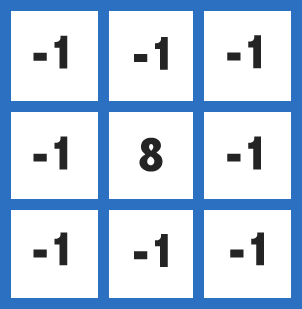
<style>
.page{position:relative;width:302px;height:309px;background:#ffffff}
.page>*{position:absolute;margin:0}
.t1{font:50px "AbadiMT-CondensedExtraBold";color:#242424}
</style>
<div class="page">
<p class="t1" style="left:33px;top:35px;width:35px;height:34px">-1</p>
<p class="t1" style="left:134px;top:37px;width:34px;height:33px">-1</p>
<p class="t1" style="left:227px;top:35px;width:34px;height:34px">-1</p>
<p class="t1" style="left:33px;top:136px;width:35px;height:34px">-1</p>
<p class="t1" style="left:139px;top:137px;width:24px;height:35px">8</p>
<p class="t1" style="left:227px;top:136px;width:34px;height:34px">-1</p>
<p class="t1" style="left:33px;top:232px;width:35px;height:34px">-1</p>
<p class="t1" style="left:230px;top:232px;width:34px;height:34px">-1</p>
<p class="t1" style="left:134px;top:234px;width:34px;height:33px">-1</p>
</div>
